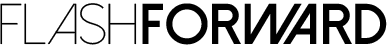
<style>
.page{position:relative;width:388px;height:50px;background:#ffffff}
.page>*{position:absolute;margin:0}
.t1{font:57.4px "DolceVitaLight";color:#000000}
.t2{font:57.4px "DolceVitaHeavy-Bold";color:#000000}
</style>
<div class="page">
<p class="t1" style="left:0px;top:3px;width:137px;height:42px">FLASH</p>
<p class="t2" style="left:142px;top:3px;width:245px;height:42px">FORWARD</p>
</div>
